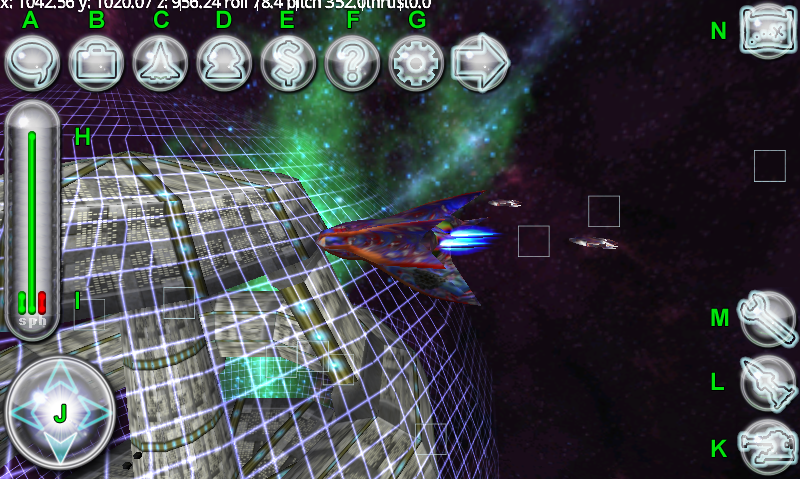
<style>
.page{position:relative;width:800px;height:479px}
.page>*{position:absolute;margin:0}
.t1{font:24px "Arial-BoldMT";color:#01e50c}
</style>
<div class="page">
<p class="t1" style="left:22px;top:10px;width:17px;height:18px">A</p>
<p class="t1" style="left:89px;top:10px;width:16px;height:18px">B</p>
<p class="t1" style="left:154px;top:10px;width:15px;height:18px">C</p>
<p class="t1" style="left:216px;top:10px;width:16px;height:18px">D</p>
<p class="t1" style="left:280px;top:10px;width:14px;height:18px">E</p>
<p class="t1" style="left:347px;top:10px;width:13px;height:18px">F</p>
<p class="t1" style="left:409px;top:10px;width:17px;height:19px">G</p>
<p class="t1" style="left:711px;top:21px;width:15px;height:18px">N</p>
<p class="t1" style="left:75px;top:127px;width:15px;height:18px">H</p>
<p class="t1" style="left:75px;top:291px;width:4px;height:18px">I</p>
<p class="t1" style="left:711px;top:308px;width:18px;height:18px">M</p>
<p class="t1" style="left:711px;top:372px;width:13px;height:18px">L</p>
<p class="t1" style="left:54px;top:404px;width:12px;height:19px">J</p>
<p class="t1" style="left:711px;top:439px;width:16px;height:18px">K</p>
</div>
